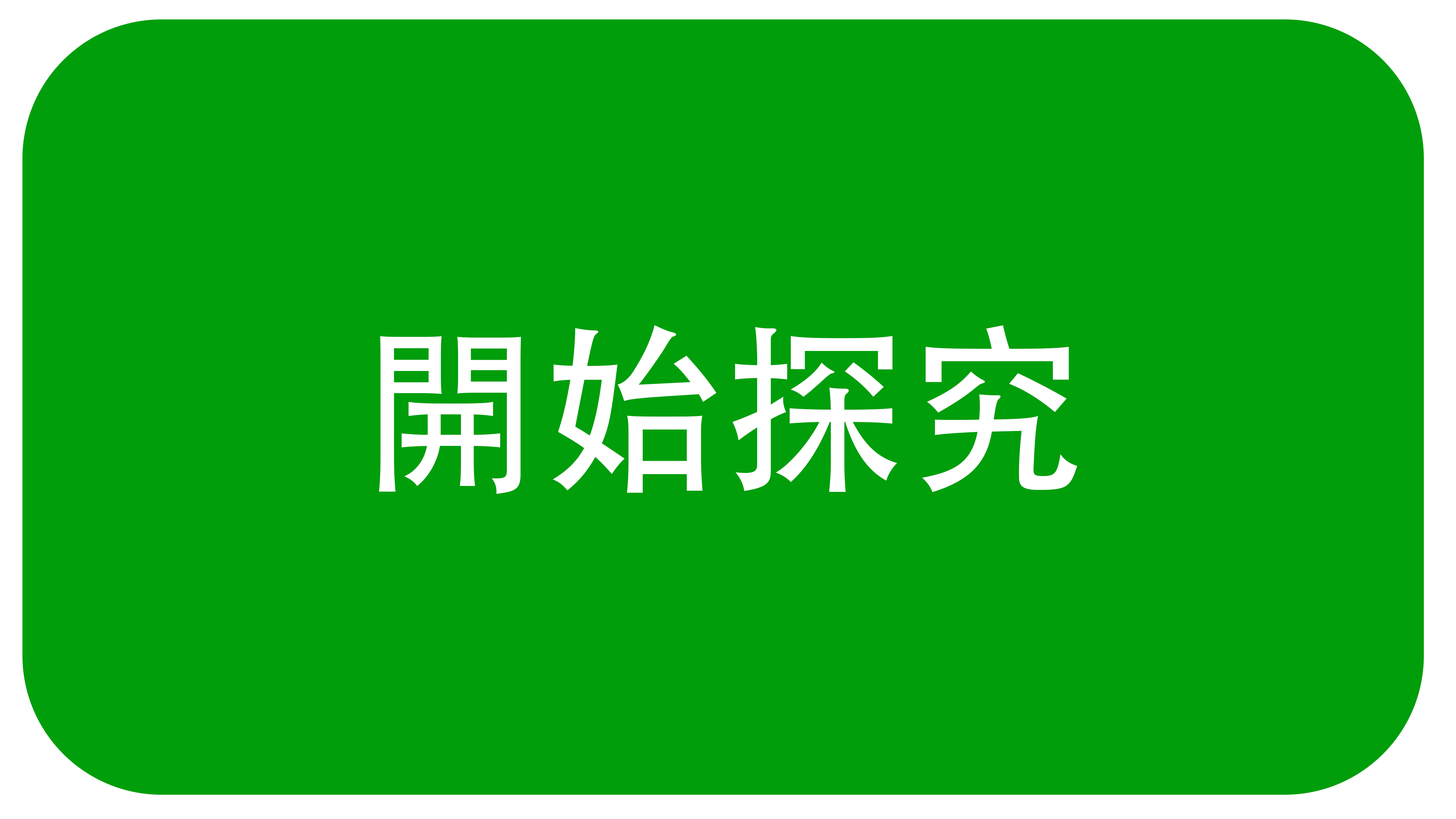
<style>
.page{position:relative;width:1456px;height:819px;background:#009e0b}
.page>*{position:absolute;margin:0}
.t1{font:182px "AdobeHeitiStd-Regular";color:#ffffff}
</style>
<div class="page">
<p class="t1" style="left:379px;top:325px;width:698px;height:169px">開始探究</p>
</div>
